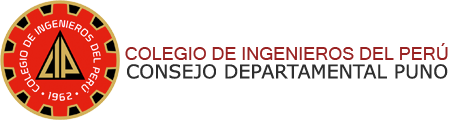
<style>
.page{position:relative;width:460px;height:120px;background:#ffffff}
.page>*{position:absolute;margin:0}
.t1{font:18px "MicrosoftSansSerif";color:#992222}
.t2{font:19px "MSReferenceSansSerif";color:#2e2e2e}
</style>
<div class="page">
<p class="t1" style="left:125px;top:43px;width:323px;height:17px">COLEGIO DE INGENIEROS DEL PERÚ</p>
<p class="t2" style="left:127px;top:64px;width:321px;height:15px">CONSEJO DEPARTAMENTAL PUNO</p>
</div>
